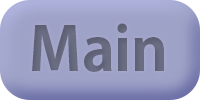
<style>
.page{position:relative;width:200px;height:100px}
.page>*{position:absolute;margin:0}
.t1{font:60px "AdobeGothicStd-Bold";color:#6b6d83}
</style>
<div class="page">
<p class="t1" style="left:32px;top:23px;width:132px;height:49px">Main</p>
</div>
